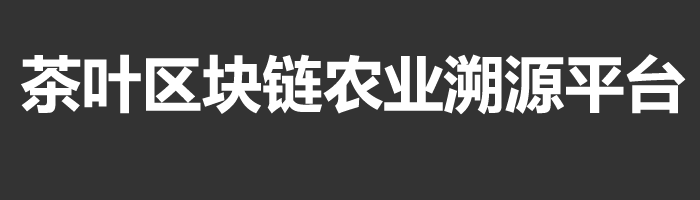
<style>
.page{position:relative;width:700px;height:200px;background:#333333}
.page>*{position:absolute;margin:0}
.t1{font:60.4px "MicrosoftYaHei-Bold";color:#ffffff}
</style>
<div class="page">
<p class="t1" style="left:21px;top:54px;width:665px;height:61px">茶叶区块链农业溯源平台</p>
</div>
